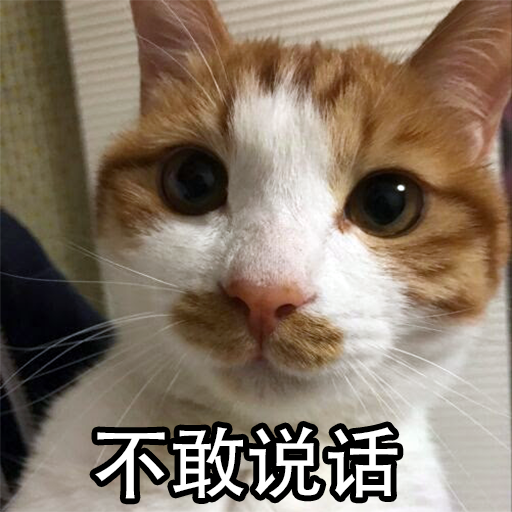
<style>
.page{position:relative;width:512px;height:512px}
.page>*{position:absolute;margin:0}
.t1{font:77.7px "AdobeHeitiStd-Regular";color:#ffffff}
</style>
<div class="page">
<p class="t1" style="left:95px;top:426px;width:303px;height:73px">不敢说话</p>
</div>
